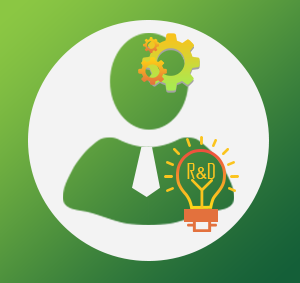
<style>
.page{position:relative;width:300px;height:283px;background:#f3f3f3}
.page>*{position:absolute;margin:0}
.t1{font:20.9px "AgencyFB-Reg";color:#fbc71e}
.t2{font:16.2px "ArialMT";color:#fbc71e}
</style>
<div class="page">
<p class="t1" style="left:187px;top:163px;width:28px;height:16px">R<span class="t2">&amp;</span>D</p>
</div>
